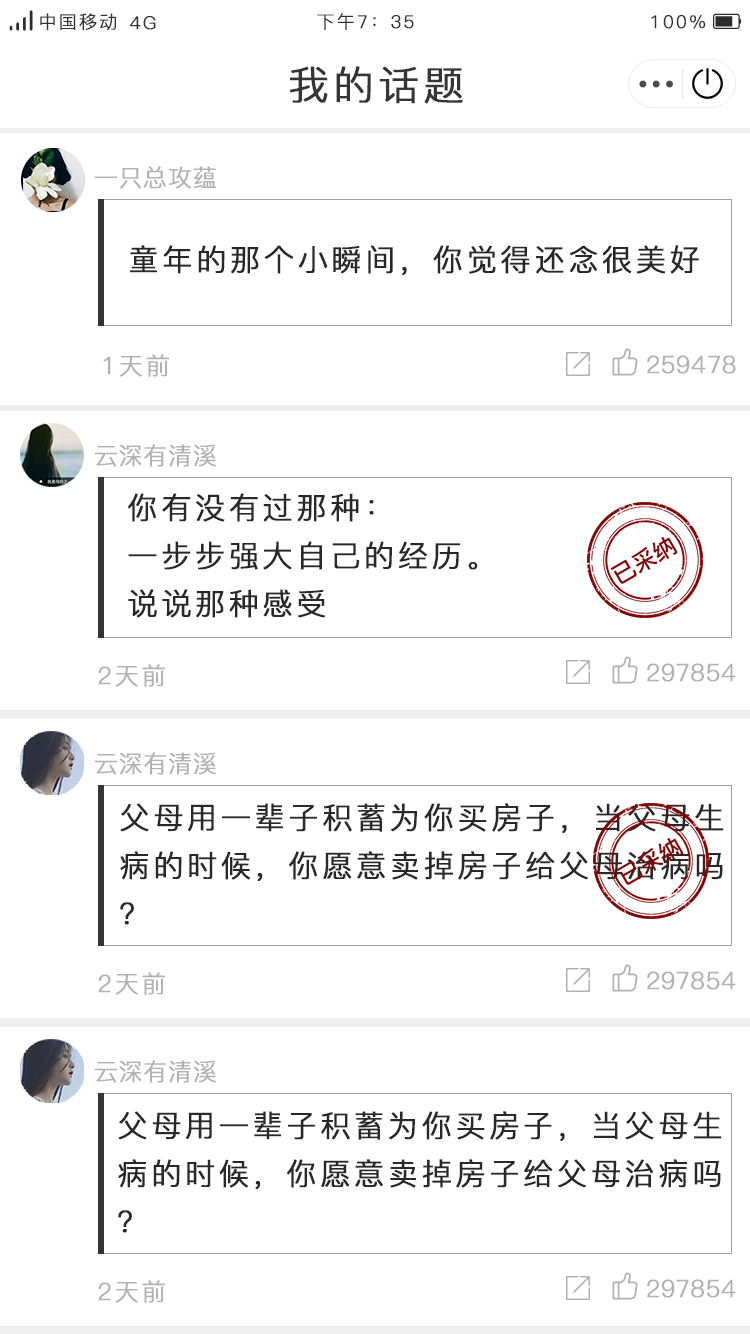
<style>
.page{position:relative;width:750px;height:1334px;background:#ffffff}
.page>*{position:absolute;margin:0}
.t1{font:18px "PingFang-SC-Regular";letter-spacing:0.1em;color:#323232;font-weight:bold}
.t2{font:40px "PingFang-SC-Regular";letter-spacing:0.1em;color:#353535;font-weight:bold}
.t3{font:24px "PingFang-SC-Regular";letter-spacing:0.1em;color:#b2b2b2;font-weight:bold}
.t4{font:30px "PingFang-SC-Regular";letter-spacing:0.1em;color:#282828;font-weight:bold}
.t5{font:30px/48px "PingFang-SC-Regular";letter-spacing:0.1em;color:#282828;font-weight:bold}
</style>
<div class="page">
<p class="t1" style="left:40px;top:13px;width:76px;height:18px">中国移动</p>
<p class="t1" style="left:130px;top:16px;width:26px;height:14px">4G</p>
<p class="t1" style="left:317px;top:13px;width:97px;height:17px">下午7：35</p>
<p class="t1" style="left:651px;top:15px;width:55px;height:14px">100%</p>
<p class="t2" style="left:290px;top:66px;width:173px;height:38px">我的话题</p>
<p class="t3" style="left:94px;top:166px;width:122px;height:23px">一只总攻蕴</p>
<p class="t4" style="left:130px;top:245px;width:569px;height:30px">童年的那个小瞬间，你觉得还念很美好</p>
<p class="t3" style="left:103px;top:354px;width:66px;height:23px">1天前</p>
<p class="t3" style="left:647px;top:355px;width:89px;height:19px">259478</p>
<p class="t3" style="left:94px;top:444px;width:122px;height:23px">云深有清溪</p>
<p class="t5" style="left:128px;top:493px;width:350px;height:125px">你有没有过那种：<br>一步步强大自己的经历。<br>说说那种感受</p>
<p class="t3" style="left:98px;top:664px;width:67px;height:23px">2天前</p>
<p class="t3" style="left:647px;top:663px;width:89px;height:19px">297854</p>
<p class="t3" style="left:94px;top:752px;width:122px;height:23px">云深有清溪</p>
<p class="t5" style="left:120px;top:803px;width:604px;height:122px">父母用一辈子积蓄为你买房子，当父母生<br>病的时候，你愿意卖掉房子给父母治病吗<br>？</p>
<p class="t3" style="left:98px;top:972px;width:67px;height:23px">2天前</p>
<p class="t3" style="left:647px;top:971px;width:89px;height:19px">297854</p>
<p class="t3" style="left:94px;top:1060px;width:122px;height:23px">云深有清溪</p>
<p class="t5" style="left:118px;top:1111px;width:604px;height:122px">父母用一辈子积蓄为你买房子，当父母生<br>病的时候，你愿意卖掉房子给父母治病吗<br>？</p>
<p class="t3" style="left:98px;top:1280px;width:67px;height:23px">2天前</p>
<p class="t3" style="left:647px;top:1279px;width:89px;height:19px">297854</p>
</div>
